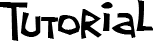
<style>
.page{position:relative;width:153px;height:41px;background:#ffffff}
.page>*{position:absolute;margin:0}
.t1{font:60px "Screwball";color:#000000}
</style>
<div class="page">
<p class="t1" style="left:0px;top:0px;width:153px;height:41px">Tutorial</p>
</div>
